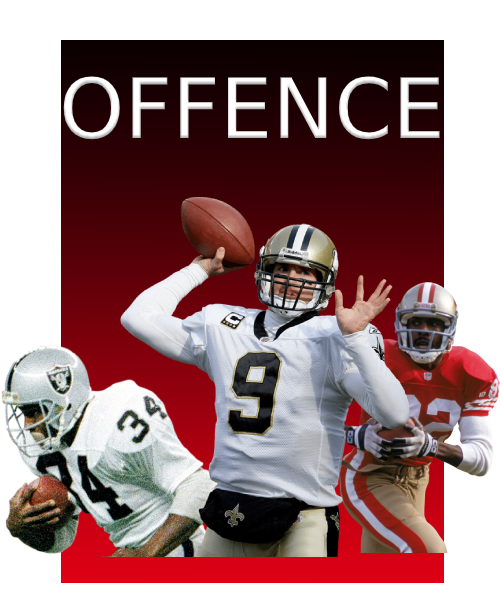
<style>
.page{position:relative;width:500px;height:600px;background:#ffffff}
.page>*{position:absolute;margin:0}
.t1{font:83px "DejaVuSans";color:#ffffff}
</style>
<div class="page">
<p class="t1" style="left:63px;top:76px;width:377px;height:64px">OFFENCE</p>
</div>
